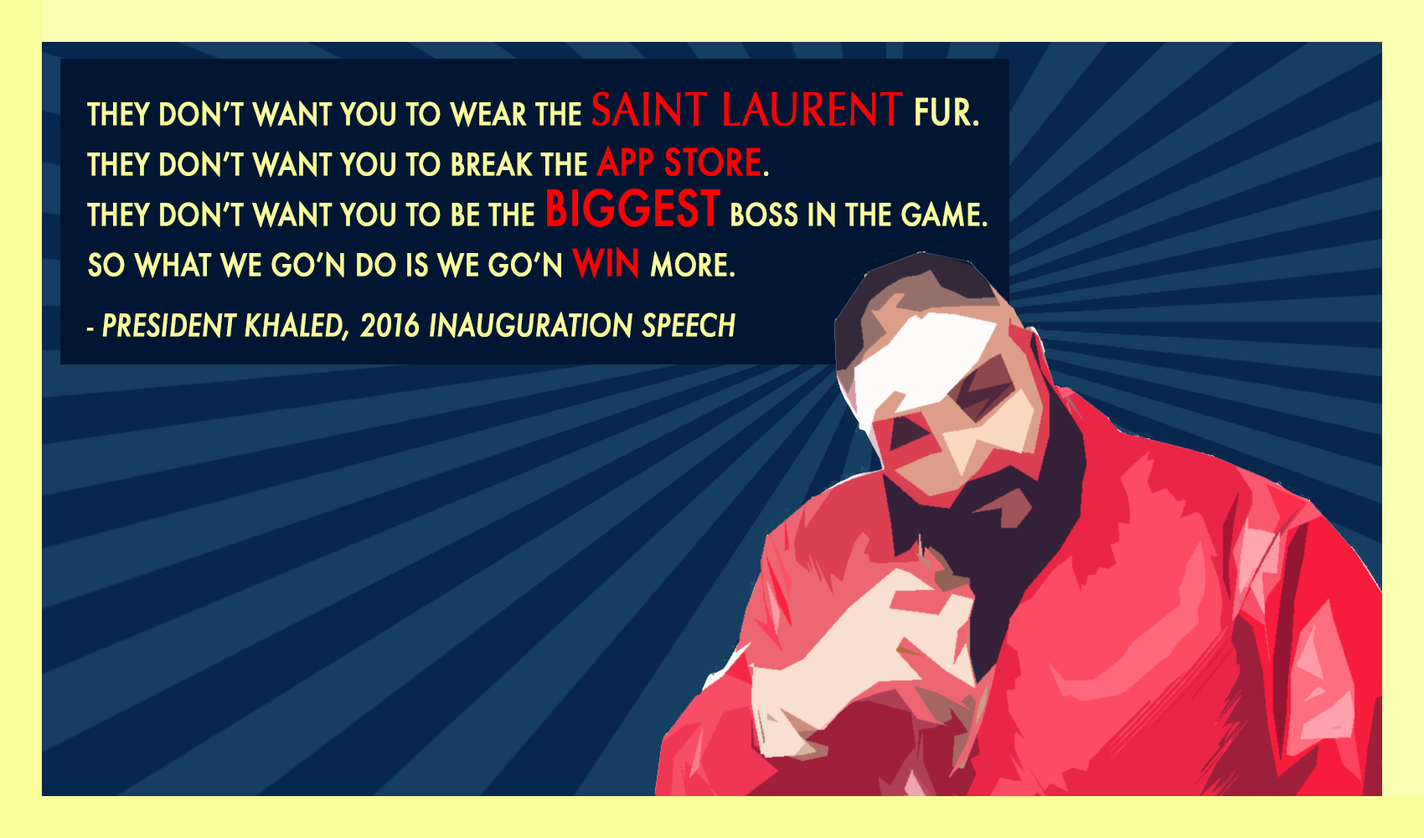
<style>
.page{position:relative;width:1424px;height:838px}
.page>*{position:absolute;margin:0}
.t1{font:29.9px/50.3px "Futura-Medium";color:#f9ff9b;font-weight:bold;scale:0.84 1}
.t2{font:47.8px/50.3px "Optima-Regular";color:#ff0000;font-weight:bold;scale:0.84 1}
.t3{font:35.9px/50.3px "Futura-Medium";color:#f9ff9b;font-weight:bold;scale:0.84 1}
.t4{font:35.9px/50.3px "Futura-Medium";color:#fc0000;font-weight:bold;scale:0.84 1}
.t5{font:47.8px/50.3px "Futura-Medium";color:#ff0000;font-weight:bold;scale:0.84 1}
.t6{font:35.9px/50.3px "Futura-Medium";color:#ff0000;font-weight:bold;scale:0.84 1}
.t7{font:29.9px/60.3px "Futura-MediumItalic";color:#f9ff9b;font-weight:bold;scale:0.84 1}
</style>
<div class="page">
<p class="t1" style="left:86px;top:92px;width:901px;height:249px">THEY DON’T WANT YOU TO WEAR THE <span class="t2">SAINT LAURENT</span><span class="t3"> FUR.</span> <br>THEY DON’T WANT YOU TO BREAK THE <span class="t4">APP STORE</span>. <br>THEY DON’T WANT YOU TO BE THE <span class="t5">BIGGEST</span> BOSS IN THE GAME. <br>SO WHAT WE GO’N DO IS WE GO’N <span class="t6">WIN</span> MORE.<br><span class="t7">- PRESIDENT KHALED, 2016 INAUGURATION SPEECH</span></p>
</div>
